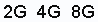
<style>
.page{position:relative;width:98px;height:22px;background:#fbfcfe}
.page>*{position:absolute;margin:0}
.t1{font:17.9px "ArialMT";color:#0c0c0c}
</style>
<div class="page">
<p class="t1" style="left:4px;top:5px;width:90px;height:13px">2G  4G  8G</p>
</div>
